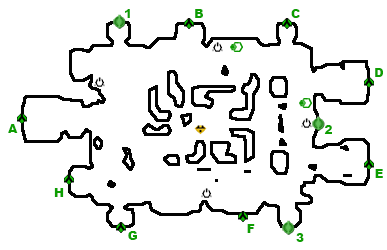
<style>
.page{position:relative;width:387px;height:250px;background:#ffffff}
.page>*{position:absolute;margin:0}
.t1{font:12px "Arial-Black";color:#0d9e01}
</style>
<div class="page">
<p class="t1" style="left:125px;top:9px;width:5px;height:9px">1</p>
<p class="t1" style="left:195px;top:9px;width:8px;height:9px">B</p>
<p class="t1" style="left:291px;top:9px;width:9px;height:9px">C</p>
<p class="t1" style="left:375px;top:68px;width:8px;height:9px">D</p>
<p class="t1" style="left:8px;top:124px;width:10px;height:9px">A</p>
<p class="t1" style="left:324px;top:125px;width:8px;height:9px">2</p>
<p class="t1" style="left:375px;top:169px;width:8px;height:9px">E</p>
<p class="t1" style="left:54px;top:188px;width:10px;height:9px">H</p>
<p class="t1" style="left:128px;top:231px;width:9px;height:9px">G</p>
<p class="t1" style="left:247px;top:224px;width:8px;height:9px">F</p>
<p class="t1" style="left:296px;top:233px;width:8px;height:9px">3</p>
</div>
